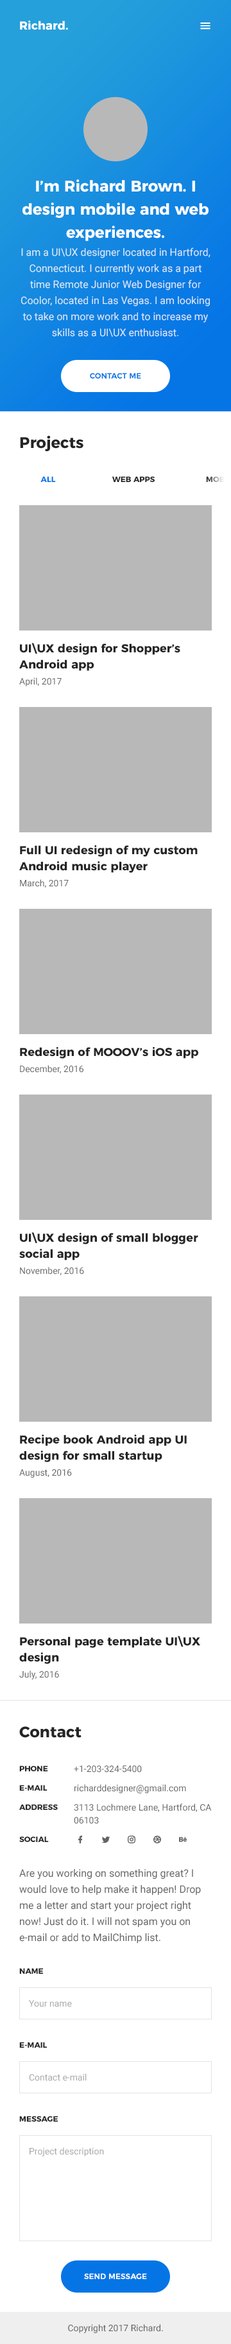
<style>
.page{position:relative;width:231px;height:2344px;background:#ffffff}
.page>*{position:absolute;margin:0}
.t1{font:11.6px "Montserrat-Bold";color:#ffffff}
.t2{font:15.4px/23.1px "Montserrat-Bold";color:#ffffff}
.t3{font:10.3px/16.1px "Roboto-Regular";color:#dde9fa}
.t4{font:7.7px "Montserrat-SemiBold";color:#0575e6;text-transform:uppercase}
.t5{font:15.4px "Montserrat-Bold";color:#252525}
.t6{font:7.7px "Montserrat-Bold";color:#0575e6;text-transform:uppercase}
.t7{font:7.7px "Montserrat-Bold";color:#252525;text-transform:uppercase}
.t8{font:11.6px/16.1px "Montserrat-Bold";color:#252525}
.t9{font:9px "Roboto-Regular";color:#646464}
.t10{font:11.6px "Montserrat-Bold";color:#252525}
.t11{font:9px/12.9px "Roboto-Regular";color:#646464}
.t12{font:10.3px/16.1px "Roboto-Regular";color:#646464}
.t13{font:9px "Roboto-Regular";color:#a7a7a7}
.t14{font:7.7px "Montserrat-SemiBold";color:#fefefe;text-transform:uppercase}
.t15{font:9px "Roboto-Regular";color:#5f5f5f}
</style>
<div class="page">
<p class="t1" style="left:20px;top:21px;width:48px;height:9px">Richard.</p>
<p class="t2" style="left:22px;top:179px;width:187px;height:62px;text-align:center">I’m Richard Brown. I  design mobile and web experiences.</p>
<p class="t3" style="left:21px;top:247px;width:190px;height:90px;text-align:center">I am a UI\UX designer located in Hartford, Connecticut. I currently work as a part time Remote Junior Web Designer for Coolor, located in Las Vegas. I am looking to take on more work and to increase my skills as a UI\UX enthusiast.</p>
<p class="t4" style="left:90px;top:373px;width:51px;height:6px">Contact me</p>
<p class="t5" style="left:20px;top:436px;width:64px;height:15px">Projects</p>
<p class="t6" style="left:40px;top:476px;width:16px;height:6px">All projects</p>
<p class="t7" style="left:112px;top:476px;width:43px;height:6px">Web apps design</p>
<p class="t8" style="left:19px;top:643px;width:162px;height:28px">UI\UX design for Shopper’s Android app</p>
<p class="t9" style="left:19px;top:678px;width:43px;height:9px">April, 2017</p>
<p class="t8" style="left:19px;top:845px;width:179px;height:28px">Full UI redesign of my custom Android music player</p>
<p class="t9" style="left:20px;top:879px;width:49px;height:9px">March, 2017</p>
<p class="t10" style="left:20px;top:1047px;width:179px;height:12px">Redesign of MOOOV’s iOS app</p>
<p class="t9" style="left:20px;top:1065px;width:64px;height:9px">December, 2016</p>
<p class="t8" style="left:19px;top:1232px;width:180px;height:29px">UI\UX design of small blogger social app</p>
<p class="t9" style="left:20px;top:1267px;width:64px;height:8px">November, 2016</p>
<p class="t8" style="left:19px;top:1435px;width:168px;height:27px">Recipe book Android app UI design for small startup</p>
<p class="t9" style="left:19px;top:1470px;width:53px;height:8px">August, 2016</p>
<p class="t8" style="left:19px;top:1636px;width:182px;height:28px">Personal page template UI\UX design</p>
<p class="t9" style="left:19px;top:1671px;width:40px;height:9px">July, 2016</p>
<p class="t5" style="left:19px;top:1727px;width:63px;height:11px">Contact</p>
<p class="t7" style="left:19px;top:1766px;width:29px;height:6px">Phone</p>
<p class="t9" style="left:74px;top:1766px;width:68px;height:7px">+1-203-324-5400</p>
<p class="t7" style="left:19px;top:1785px;width:29px;height:6px">E-mail</p>
<p class="t9" style="left:75px;top:1785px;width:111px;height:9px">richarddesigner@gmail.com</p>
<p class="t7" style="left:19px;top:1804px;width:39px;height:6px">Address</p>
<p class="t11" style="left:74px;top:1804px;width:138px;height:20px">3113 Lochmere Lane, Hartford, CA 06103</p>
<p class="t7" style="left:19px;top:1837px;width:30px;height:5px">Social</p>
<p class="t12" style="left:19px;top:1869px;width:182px;height:75px">Are you working on something great? I would love to help make it happen! Drop me a letter and start your project right now! Just do it. I will not spam you on e-mail or add to MailChimp list.</p>
<p class="t7" style="left:19px;top:1968px;width:24px;height:6px">Name</p>
<p class="t13" style="left:29px;top:2001px;width:43px;height:7px">Your name</p>
<p class="t7" style="left:19px;top:2042px;width:28px;height:6px">E-mail</p>
<p class="t13" style="left:29px;top:2074px;width:58px;height:8px">Contact e-mail</p>
<p class="t7" style="left:19px;top:2116px;width:39px;height:6px">Message</p>
<p class="t13" style="left:30px;top:2148px;width:74px;height:9px">Project description</p>
<p class="t14" style="left:84px;top:2274px;width:63px;height:6px">Send message</p>
<p class="t15" style="left:68px;top:2325px;width:95px;height:9px">Copyright 2017 Richard.</p>
</div>
